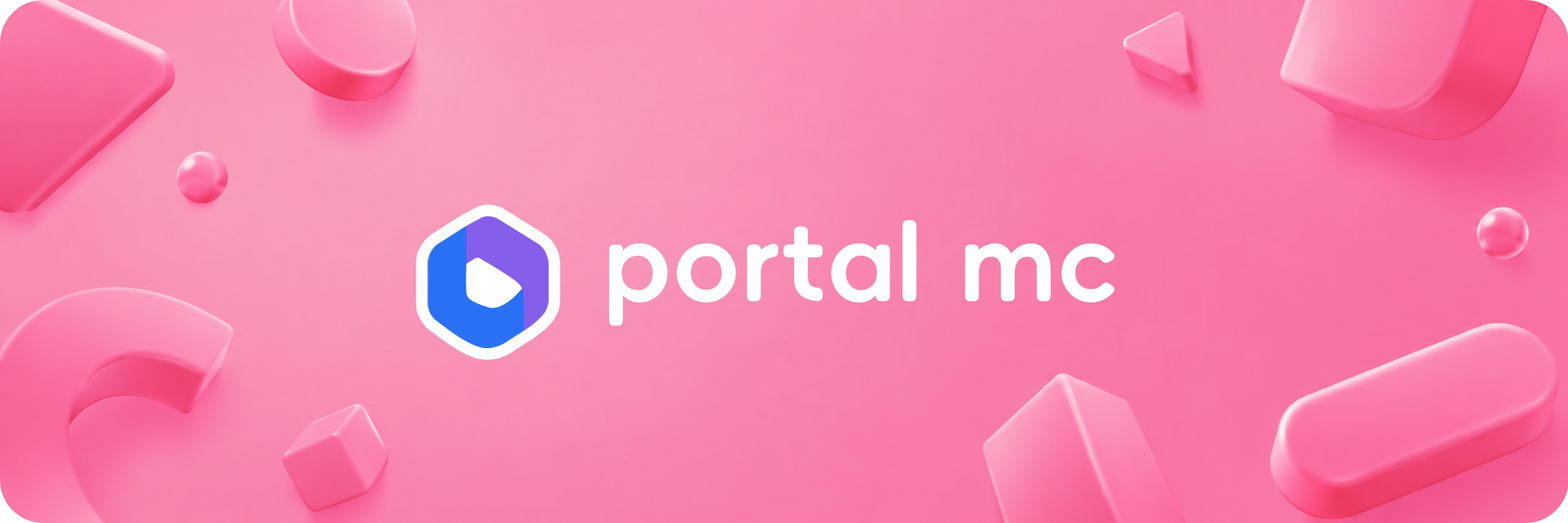
<style>
.page{position:relative;width:1568px;height:523px}
.page>*{position:absolute;margin:0}
.t1{font:106.5px "AlimamaFangYuanTi-Bold";color:#ffffff}
</style>
<div class="page">
<p class="t1" style="left:609px;top:219px;width:506px;height:107px">portal mc</p>
</div>
